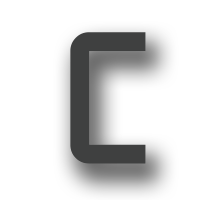
<style>
.page{position:relative;width:215px;height:200px;background:#ffffff}
.page>*{position:absolute;margin:0}
.t1{font:150px "Manteka";color:#3f4040}
</style>
<div class="page">
<p class="t1" style="left:70px;top:32px;width:76px;height:132px">c</p>
</div>
